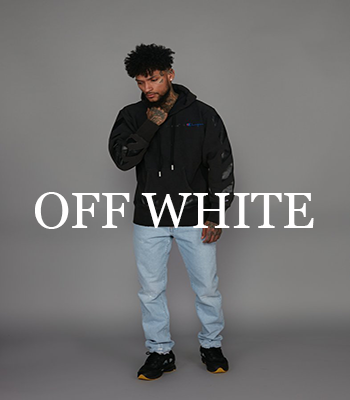
<style>
.page{position:relative;width:350px;height:400px}
.page>*{position:absolute;margin:0}
.t1{font:50px "Georgia";color:#fffefe}
</style>
<div class="page">
<p class="t1" style="left:35px;top:192px;width:279px;height:37px">OFF WHITE</p>
</div>
